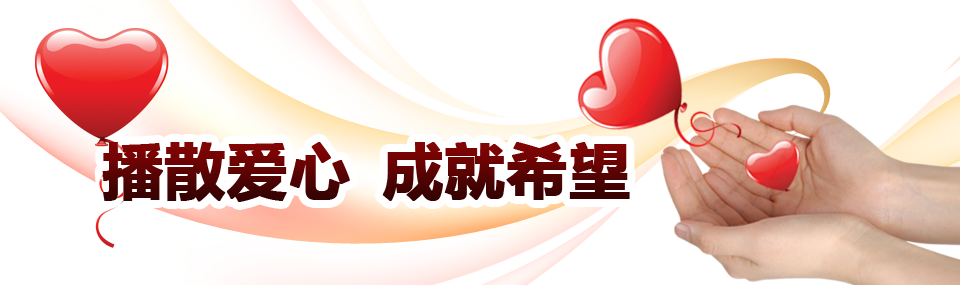
<style>
.page{position:relative;width:960px;height:285px;background:#ffffff}
.page>*{position:absolute;margin:0}
.t1{font:60px "MicrosoftYaHei-Bold";letter-spacing:0.01em;font-weight:bold}
</style>
<div class="page">
<p class="t1" style="left:102px;top:142px;width:248px;height:60px">播散爱心</p>
<p class="t1" style="left:382px;top:142px;width:248px;height:59px">成就希望</p>
</div>
